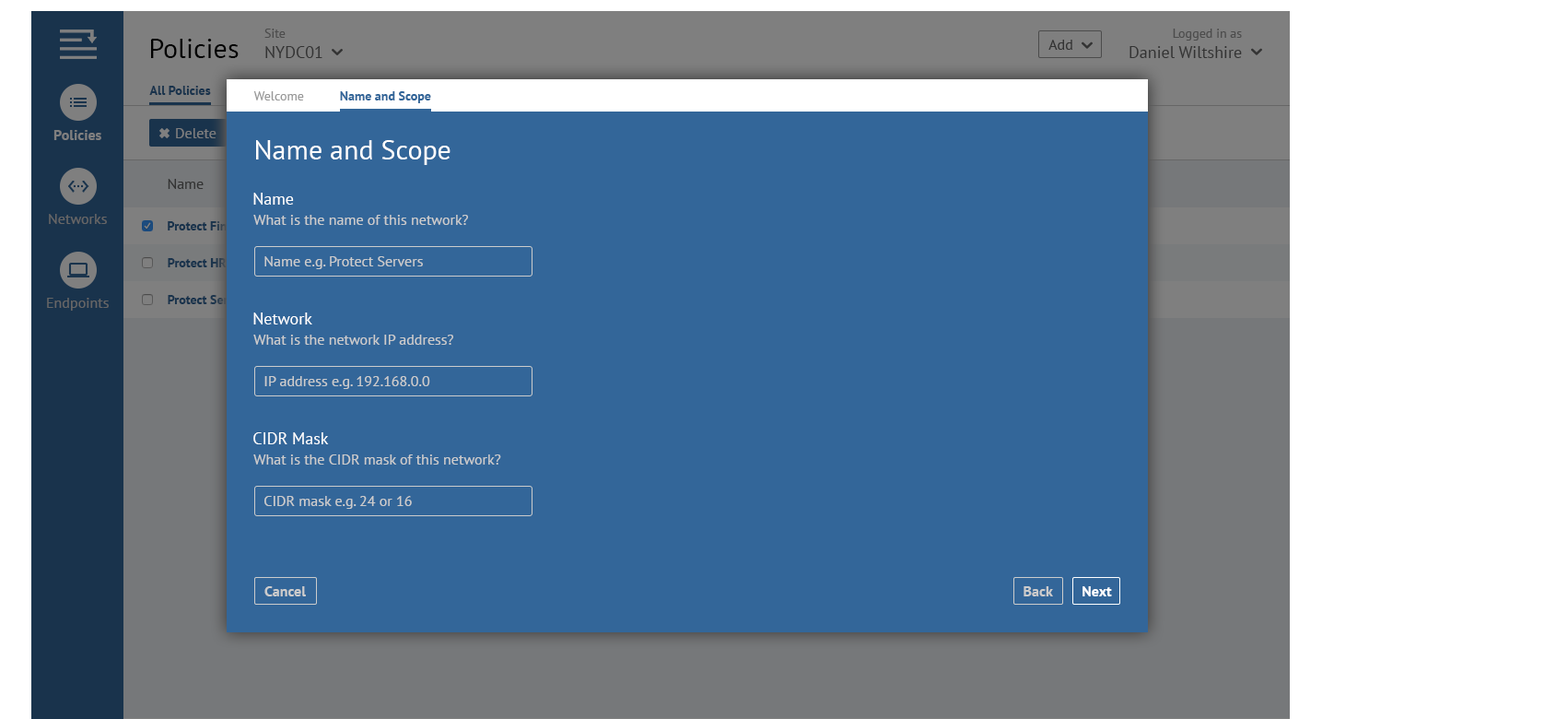
<style>
.page{position:relative;width:1568px;height:719px;background:#336699}
.page>*{position:absolute;margin:0}
.t1{font:16.6px "PTSans-Regular"}
.t2{font:12.9px "PTSans-Regular"}
.t3{font:16.8px "PTSans-Regular"}
.t4{font:13.1px "PTSans-Regular"}
.t5{font:27.6px "PTSans-Regular";color:#000000}
.t6{font:14.7px "PTSans-Regular";color:#333333}
.t7{font:12.8px "PTSans-Bold";color:#19334c}
.t8{font:12.8px "PTSans-Regular";color:#999999}
.t9{font:12.8px "PTSans-Bold";color:#336699}
.t10{font:14.7px "PTSans-Bold";color:#7f7f7f}
.t11{font:14.7px "PTSans-Regular";color:#7f7f7f}
.t12{font:27.6px "PTSans-Regular";color:#ffffff}
.t13{font:16.6px "PTSans-Regular";color:#ffffff}
.t14{font:14.7px "PTSans-Regular";color:#666666}
.t15{font:12.9px "PTSans-Bold"}
.t16{font:14.7px "PTSans-Regular";color:#cccccc}
.t17{font:12.9px "PTSans-Bold";color:#19334c}
.t18{font:14.7px "PTSans-Bold";color:#cccccc}
.t19{font:14.7px "PTSans-Bold";color:#ffffff}
</style>
<div class="page">
<p class="t1" style="left:264px;top:29px;width:58px;height:29px"><span class="t2">Site<br></span>NYDC01</p>
<p class="t3" style="left:1129px;top:29px;width:113px;height:29px;text-align:right"><span class="t4">Logged in as<br></span>Daniel Wiltshire</p>
<p class="t5" style="left:151px;top:39px;width:88px;height:19px">Policies</p>
<p class="t6" style="left:1048px;top:40px;width:24px;height:10px">Add</p>
<p class="t7" style="left:149px;top:86px;width:62px;height:9px">All Policies</p>
<p class="t8" style="left:253px;top:91px;width:51px;height:9px">Welcome</p>
<p class="t9" style="left:340px;top:91px;width:91px;height:12px">Name and Scope</p>
<p class="t10" style="left:53px;top:130px;width:48px;height:10px">Policies</p>
<p class="t11" style="left:176px;top:128px;width:40px;height:10px">Delete</p>
<p class="t12" style="left:256px;top:140px;width:195px;height:25px">Name and Scope</p>
<p class="t6" style="left:168px;top:179px;width:36px;height:10px">Name</p>
<p class="t13" style="left:253px;top:193px;width:41px;height:12px">Name</p>
<p class="t14" style="left:49px;top:214px;width:58px;height:10px">Networks</p>
<p class="t15" style="left:168px;top:221px;width:84px;height:9px">Protect Finance</p>
<p class="t16" style="left:253px;top:215px;width:215px;height:10px">What is the name of this network?</p>
<p class="t17" style="left:168px;top:258px;width:59px;height:9px">Protect HR</p>
<p class="t16" style="left:264px;top:256px;width:159px;height:13px">Name e.g. Protect Servers</p>
<p class="t14" style="left:47px;top:298px;width:62px;height:12px">Endpoints</p>
<p class="t15" style="left:168px;top:295px;width:83px;height:9px">Protect Servers</p>
<p class="t13" style="left:253px;top:312px;width:59px;height:12px">Network</p>
<p class="t16" style="left:253px;top:334px;width:200px;height:11px">What is the network IP address?</p>
<p class="t16" style="left:264px;top:376px;width:166px;height:13px">IP address e.g. 192.168.0.0</p>
<p class="t13" style="left:253px;top:432px;width:76px;height:12px">CIDR Mask</p>
<p class="t16" style="left:253px;top:454px;width:248px;height:10px">What is the CIDR mask of this network?</p>
<p class="t16" style="left:264px;top:496px;width:148px;height:13px">CIDR mask e.g. 24 or 16</p>
<p class="t18" style="left:264px;top:586px;width:42px;height:10px">Cancel</p>
<p class="t18" style="left:1024px;top:586px;width:29px;height:10px">Back</p>
<p class="t19" style="left:1082px;top:586px;width:30px;height:10px">Next</p>
</div>
